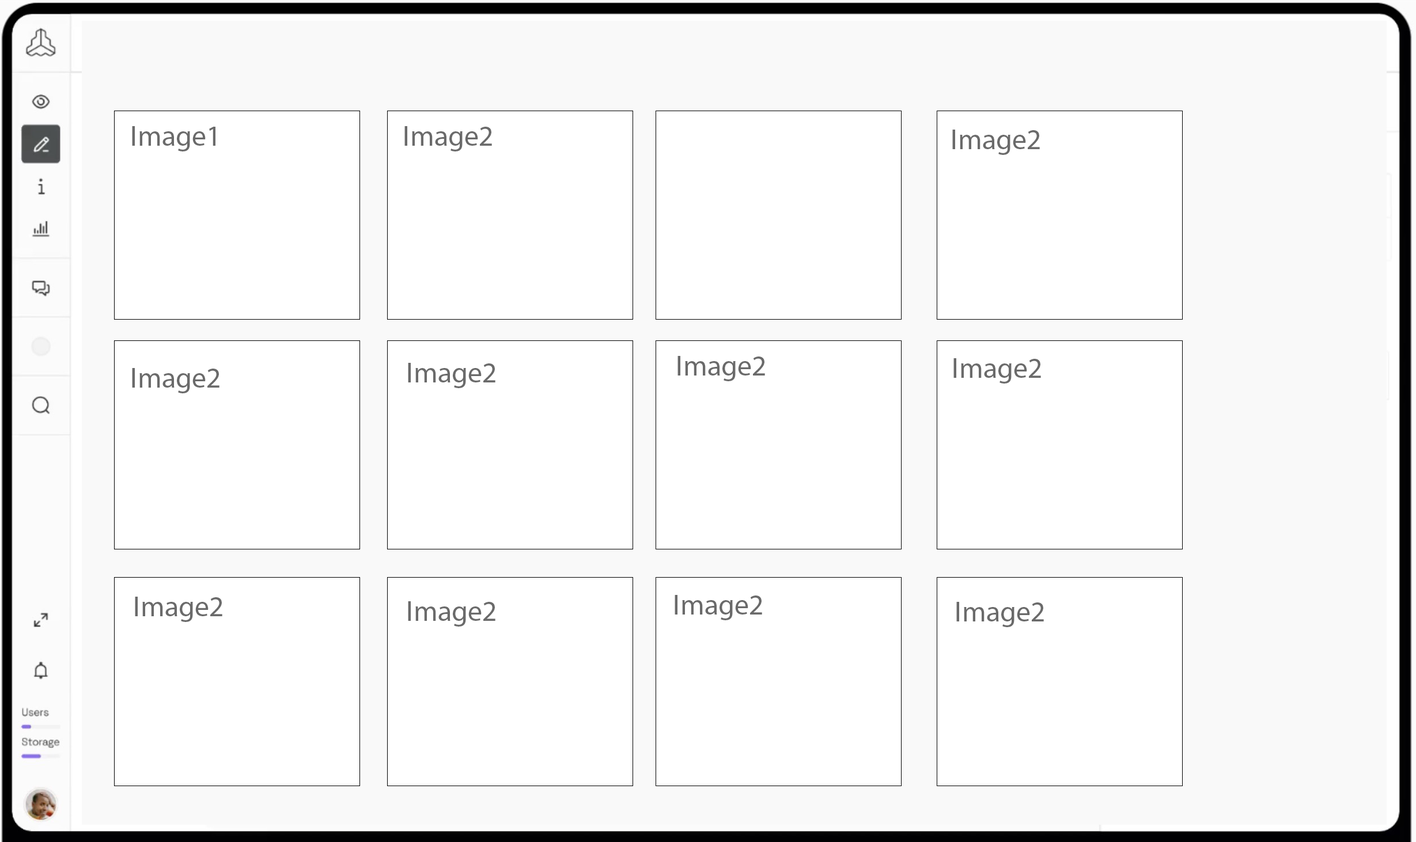
<style>
.page{position:relative;width:1416px;height:842px;background:#ffffff}
.page>*{position:absolute;margin:0}
.t1{font:28.8px "MyriadPro-Regular";color:#6a6a6a}
</style>
<div class="page">
<p class="t1" style="left:132px;top:126px;width:83px;height:25px">Image1</p>
<p class="t1" style="left:404px;top:126px;width:88px;height:25px">Image2</p>
<p class="t1" style="left:952px;top:130px;width:88px;height:25px">Image2</p>
<p class="t1" style="left:408px;top:363px;width:87px;height:25px">Image2</p>
<p class="t1" style="left:677px;top:356px;width:88px;height:25px">Image2</p>
<p class="t1" style="left:953px;top:358px;width:88px;height:26px">Image2</p>
<p class="t1" style="left:132px;top:368px;width:87px;height:25px">Image2</p>
<p class="t1" style="left:135px;top:597px;width:87px;height:25px">Image2</p>
<p class="t1" style="left:408px;top:601px;width:87px;height:26px">Image2</p>
<p class="t1" style="left:675px;top:595px;width:87px;height:25px">Image2</p>
<p class="t1" style="left:956px;top:602px;width:88px;height:25px">Image2</p>
</div>
